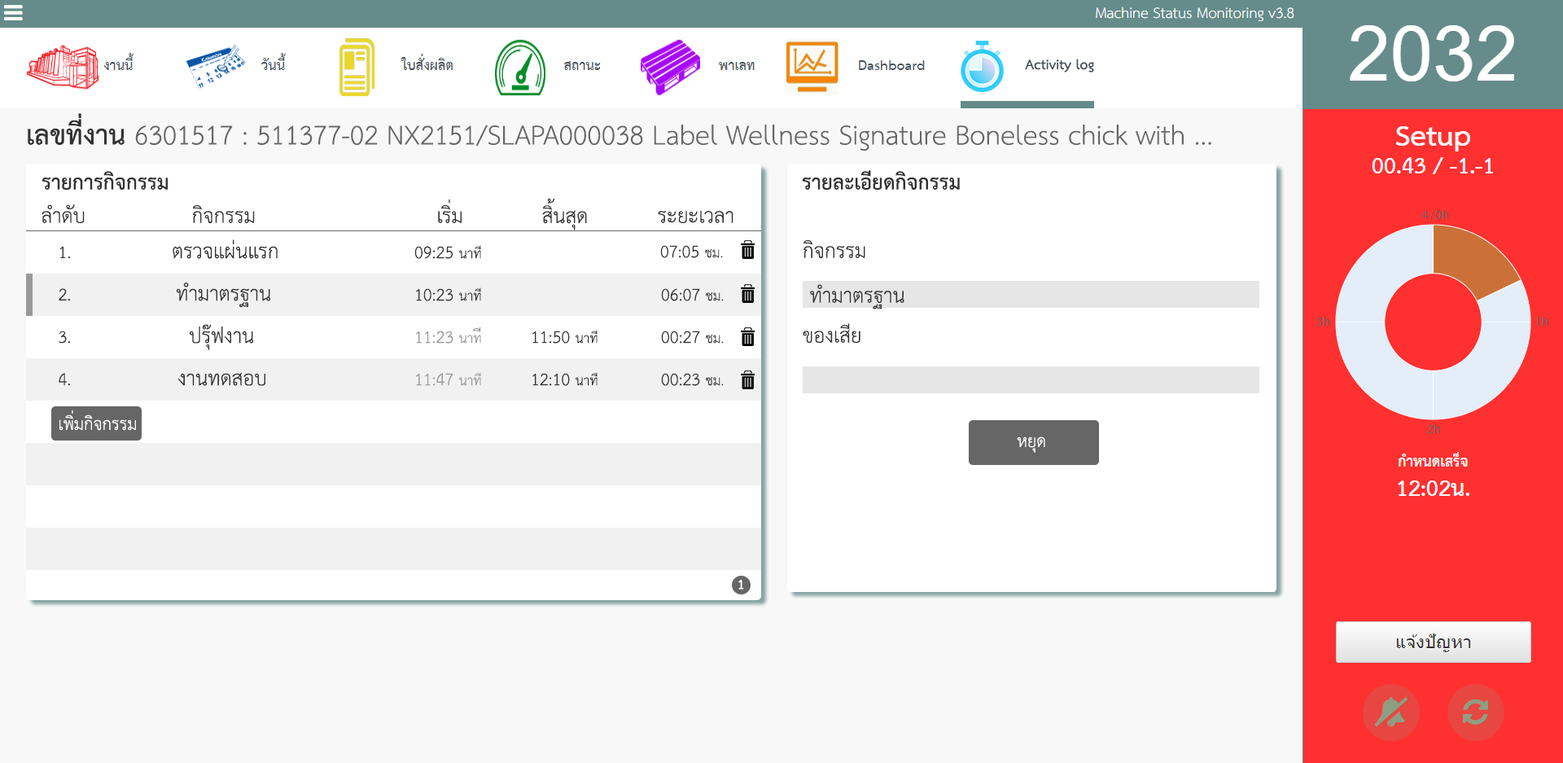
<style>
.page{position:relative;width:1563px;height:763px;background:#ffffff}
.page>*{position:absolute;margin:0}
.t1{font:19.5px "THSarabunNew-Bold";color:#434d56}
.t2{font:39.1px "THSarabunNew";color:#666666}
.t3{font:39.1px "THSarabunNew-Bold";color:#333333}
.t4{font:29.3px "THSarabunNew-Bold";color:#333333}
.t5{font:29.3px "THSarabunNew";color:#333333}
.t6{font:24.4px "THSarabunNew";color:#333333}
.t7{font:19.5px "THSarabunNew";color:#333333}
.t8{font:24.4px "THSarabunNew";color:#999999}
.t9{font:19.5px "THSarabunNew";color:#999999}
.t10{font:24.4px "THSarabunNew";color:#ffffff}
.t11{font:19.5px "THSarabunNew-Bold";color:#ffffff}
</style>
<div class="page">
<p class="t1" style="left:1025px;top:59px;width:69px;height:13px">Activity log</p>
<p class="t2" style="left:28px;top:113px;width:1183px;height:38px"><span class="t3">เลขที่งาน </span>6301517 : 511377-02 NX2151/SLAPA000038 Label Wellness Signature Boneless chick with ...</p>
<p class="t4" style="left:42px;top:171px;width:126px;height:19px">รายการกิจกรรม</p>
<p class="t4" style="left:802px;top:170px;width:158px;height:20px">รายละเอียดกิจกรรม</p>
<p class="t5" style="left:542px;top:198px;width:45px;height:32px">สิ้นสุด</p>
<p class="t5" style="left:42px;top:204px;width:43px;height:19px">ลำดับ</p>
<p class="t5" style="left:192px;top:205px;width:63px;height:19px">กิจกรรม</p>
<p class="t5" style="left:438px;top:199px;width:24px;height:24px">เริ่ม</p>
<p class="t5" style="left:658px;top:211px;width:76px;height:12px">ระยะเวลา</p>
<p class="t6" style="left:59px;top:246px;width:11px;height:13px">1.</p>
<p class="t5" style="left:173px;top:239px;width:105px;height:20px">ตรวจแผ่นแรก</p>
<p class="t6" style="left:414px;top:245px;width:67px;height:14px">09:25 <span class="t7">นาที</span></p>
<p class="t6" style="left:660px;top:245px;width:63px;height:13px">07:05 <span class="t7">ชม.</span></p>
<p class="t5" style="left:804px;top:239px;width:61px;height:19px">กิจกรรม</p>
<p class="t6" style="left:59px;top:288px;width:11px;height:13px">2.</p>
<p class="t5" style="left:176px;top:283px;width:95px;height:25px">ทำมาตรฐาน</p>
<p class="t6" style="left:416px;top:287px;width:65px;height:14px">10:23 <span class="t7">นาที</span></p>
<p class="t6" style="left:661px;top:288px;width:63px;height:13px">06:07 <span class="t7">ชม.</span></p>
<p class="t5" style="left:810px;top:284px;width:95px;height:25px">ทำมาตรฐาน</p>
<p class="t5" style="left:189px;top:324px;width:65px;height:26px">ปรุ๊ฟงาน</p>
<p class="t8" style="left:416px;top:326px;width:65px;height:18px">11:23 <span class="t9">นาท</span>ี</p>
<p class="t6" style="left:532px;top:330px;width:66px;height:14px">11:50 <span class="t7">นาที</span></p>
<p class="t5" style="left:803px;top:323px;width:58px;height:20px">ของเสีย</p>
<p class="t6" style="left:59px;top:331px;width:11px;height:13px">3.</p>
<p class="t6" style="left:661px;top:331px;width:63px;height:13px">00:27 <span class="t7">ชม.</span></p>
<p class="t6" style="left:59px;top:373px;width:11px;height:13px">4.</p>
<p class="t5" style="left:177px;top:372px;width:88px;height:14px">งานทดสอบ</p>
<p class="t8" style="left:416px;top:372px;width:65px;height:14px">11:47 <span class="t9">นาที</span></p>
<p class="t6" style="left:532px;top:372px;width:66px;height:14px">12:10 <span class="t7">นาที</span></p>
<p class="t6" style="left:661px;top:373px;width:63px;height:13px">00:23 <span class="t7">ชม.</span></p>
<p class="t10" style="left:59px;top:410px;width:77px;height:21px">เพิ่มกิจกรรม</p>
<p class="t10" style="left:1017px;top:436px;width:28px;height:17px">หยุด</p>
<p class="t11" style="left:738px;top:579px;width:6px;height:10px">1</p>
</div>
